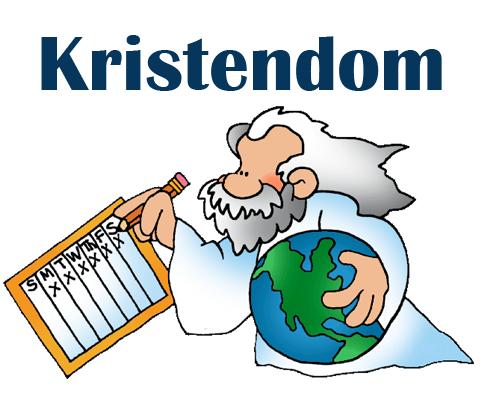
<style>
.page{position:relative;width:483px;height:404px;background:#ffffff}
.page>*{position:absolute;margin:0}
.t1{font:80px "BritannicBold";color:#06365b}
</style>
<div class="page">
<p class="t1" style="left:41px;top:35px;width:401px;height:56px">Kristendom</p>
</div>
